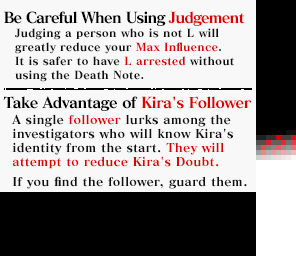
<style>
.page{position:relative;width:296px;height:256px;background:#f8f8f8}
.page>*{position:absolute;margin:0}
.t1{font:15px/85px "MatissePro-EB";letter-spacing:-0.075em;color:#000000}
.t2{font:15px/85px "MatissePro-EB";letter-spacing:-0.075em;color:#d80000}
.t3{font:15px/85px "MatissePro-EB";letter-spacing:-0.05em;color:#000000}
.t4{font:15px/85px "MatissePro-EB";letter-spacing:-0.05em;color:#d80000}
.t5{font:11px/14px "MatissePro-EB";letter-spacing:0.01em;color:#101010}
.t6{font:11px/14px "MatissePro-EB";letter-spacing:0.01em;color:#d80000}
.t7{font:12px/14px "MatissePro-EB";letter-spacing:0.01em;color:#101010}
.t8{font:12px/14px "MatissePro-EB";letter-spacing:0.01em;color:#d80000}
</style>
<div class="page">
<p class="t1" style="left:3px;top:11px;width:249px;height:100px">Be Careful When Using <span class="t2">Judgement<br></span><span class="t3">Take Advantage of </span><span class="t4">Kira's Follower</span></p>
<p class="t5" style="left:15px;top:28px;width:220px;height:54px">Judging a person who is not L will<br>greatly reduce your <span class="t6">Max Influence</span>.<br>It is safer to have <span class="t6">L arrested</span> without<br>using the Death Note.</p>
<p class="t7" style="left:11px;top:114px;width:236px;height:75px">A single <span class="t8">follower</span> lurks among the<br>investigators who will know Kira's<br>identity from the start. <span class="t8">They will<br>attempt to reduce Kira's Doubt.<br> <br></span>If you find the follower, guard them.</p>
</div>
